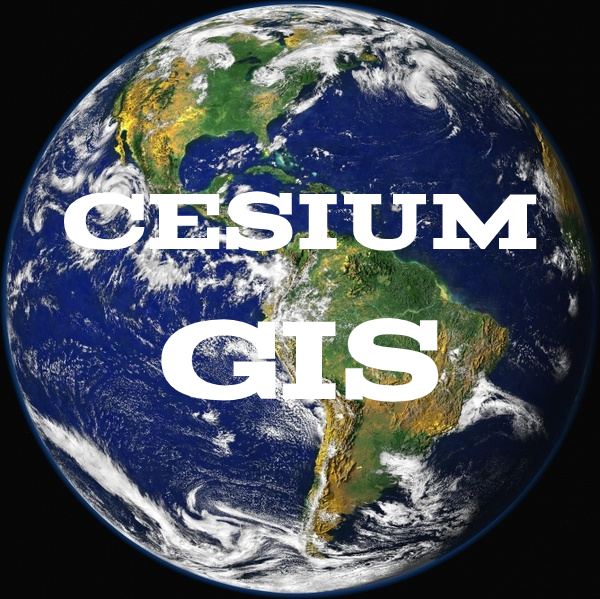
<style>
.page{position:relative;width:600px;height:599px}
.page>*{position:absolute;margin:0}
.t1{font:89px "Acknowledgement";color:#ffffff}
.t2{font:125px "Acknowledgement";color:#ffffff}
</style>
<div class="page">
<p class="t1" style="left:63px;top:191px;width:474px;height:211px;text-align:center">Cesium<br><span class="t2">GIS</span></p>
</div>
